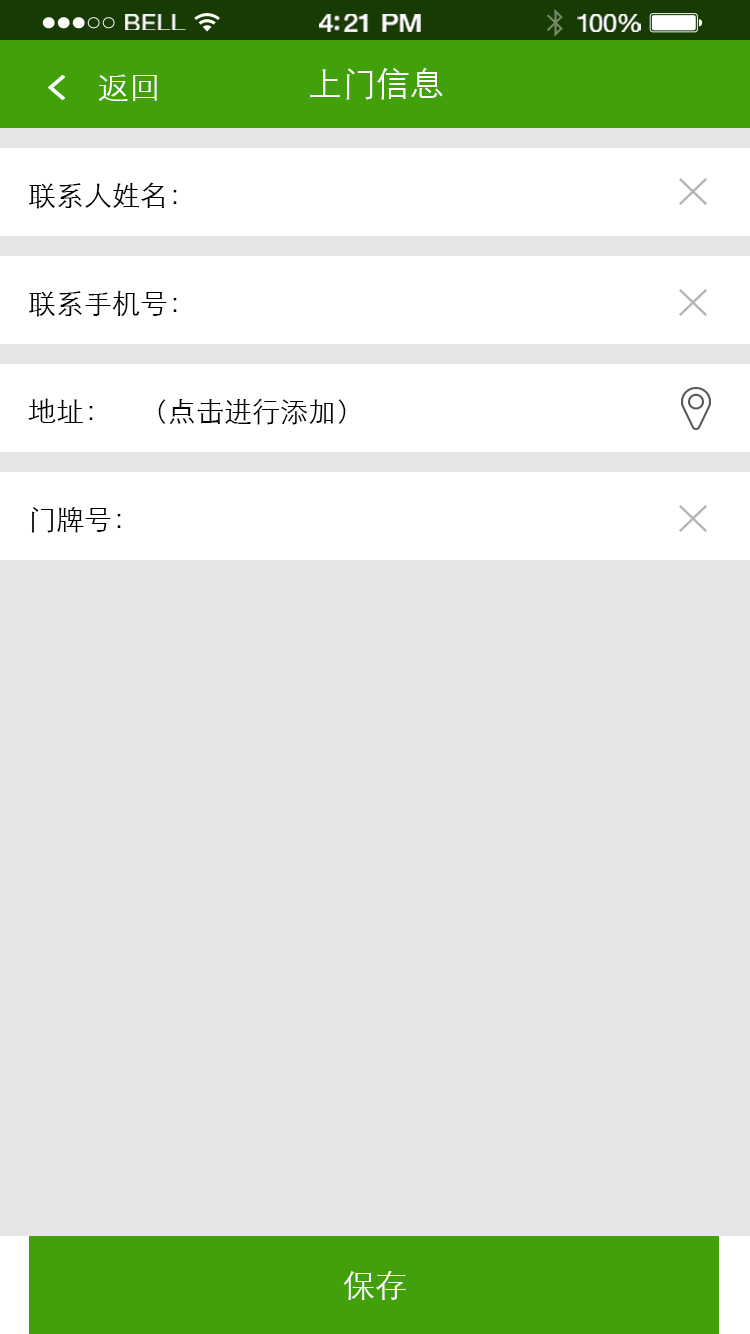
<style>
.page{position:relative;width:750px;height:1334px;background:#e6e6e6}
.page>*{position:absolute;margin:0}
.t1{font:23.3px "HelveticaNeue";letter-spacing:0.02em;color:#ffffff;scale:1.06 1}
.t2{font:25.3px "HelveticaNeue-Medium";letter-spacing:-0.02em;color:#ffffff;scale:1.06 1}
.t3{font:24.3px "HelveticaNeue";letter-spacing:-0.02em;color:#ffffff;scale:1.06 1}
.t4{font:32px "STXihei";color:#ffffff}
.t5{font:34px "STXihei";color:#ffffff}
.t6{font:28px "STXihei";color:#000000}
</style>
<div class="page">
<p class="t1" style="left:125px;top:14px;width:61px;height:16px">BELL</p>
<p class="t2" style="left:319px;top:14px;width:102px;height:18px">4:21 PM</p>
<p class="t3" style="left:577px;top:14px;width:64px;height:18px">100%</p>
<p class="t4" style="left:98px;top:74px;width:59px;height:27px">返回</p>
<p class="t5" style="left:310px;top:68px;width:133px;height:32px">上门信息</p>
<p class="t6" style="left:29px;top:182px;width:148px;height:27px">联系人姓名：</p>
<p class="t6" style="left:29px;top:290px;width:148px;height:27px">联系手机号：</p>
<p class="t6" style="left:28px;top:398px;width:318px;height:27px">地址：    （点击进行添加）</p>
<p class="t6" style="left:31px;top:507px;width:90px;height:26px">门牌号：</p>
<p class="t4" style="left:343px;top:1271px;width:63px;height:29px">保存</p>
</div>
